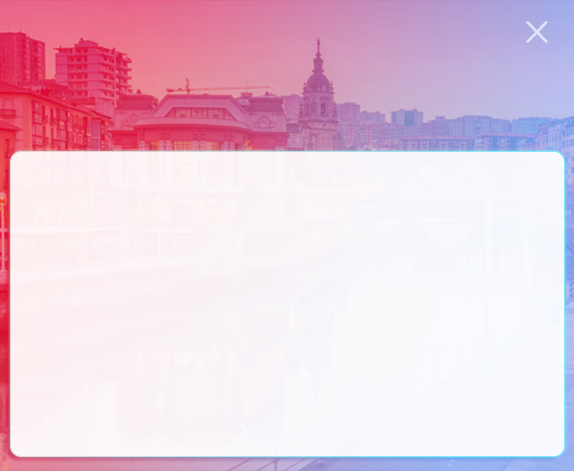
<style>
.page{position:relative;width:574px;height:471px}
.page>*{position:absolute;margin:0}
.t1{font:28.9px "Quicksand-Light";color:#e1e5f6;font-variant:small-caps;font-weight:bold;scale:1.32 1}
</style>
<div class="page">
<p class="t1" style="left:526px;top:21px;width:22px;height:22px">X</p>
</div>
